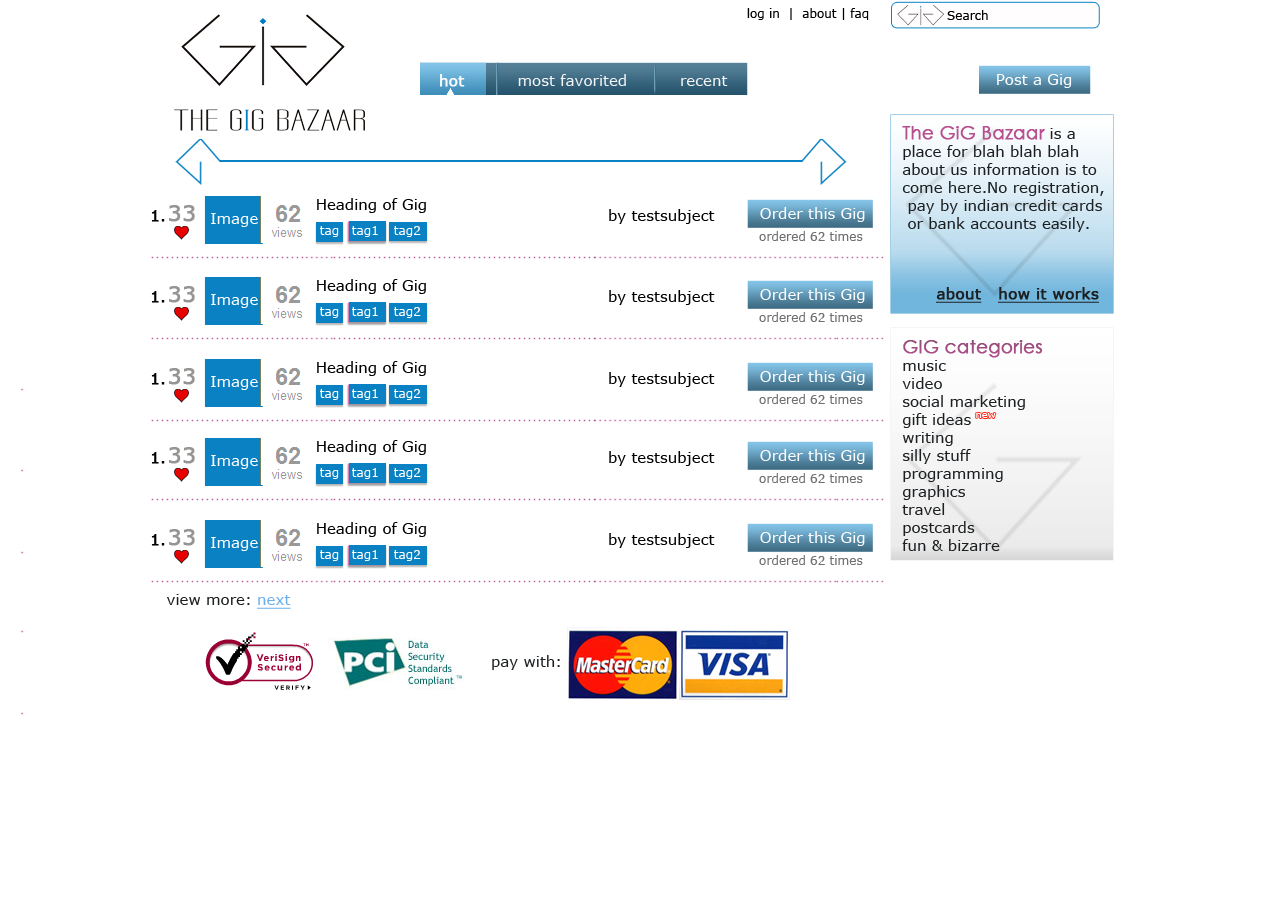
<style>
.page{position:relative;width:1263px;height:924px;background:#ffffff}
.page>*{position:absolute;margin:0}
.t1{font:12px "Verdana";color:#000000}
.t2{font:15px "Verdana";color:#f5f5f5}
.t3{font:15px "Verdana";color:#fcfafb;font-weight:bold}
.t4{font:15px "Verdana";color:#ffffff}
.t5{font:15px "Verdana";color:#1d2022}
.t6{font:18px "CenturyGothic";color:#b74f8f;font-weight:bold}
.t7{font:15px "Verdana";color:#010000}
.t8{font:22px "Verdana";color:#969594;font-weight:bold}
.t9{font:15px "Verdana";color:#000000;font-weight:bold}
.t10{font:15px "Verdana";color:#fefefe}
.t11{font:12px "Verdana";color:#ffffff}
.t12{font:12px "Verdana";color:#72706f}
.t13{font:15px "Verdana";color:#1d2022;font-weight:bold;text-decoration:underline}
.t14{font:9.7px "Verdana";color:#ffffff}
.t15{font:15px "Verdana";color:#6bb0eb;text-decoration:underline}
</style>
<div class="page">
<p class="t1" style="left:747px;top:8px;width:122px;height:12px">log in  |  about | faq</p>
<p class="t1" style="left:947px;top:10px;width:41px;height:10px">Search</p>
<p class="t2" style="left:440px;top:74px;width:288px;height:13px"><span class="t3">hot      </span>    most favorited          recent</p>
<p class="t4" style="left:997px;top:74px;width:75px;height:14px">Post a Gig</p>
<p class="t5" style="left:902px;top:126px;width:202px;height:106px"><span class="t6">The GiG Bazaar </span>is a <br>place for blah blah blah <br>about us information is to <br>come here.No registration,<br> pay by indian credit cards<br> or bank accounts easily.</p>
<p class="t7" style="left:317px;top:198px;width:109px;height:15px">Heading of Gig</p>
<p class="t8" style="left:169px;top:205px;width:26px;height:17px">33</p>
<p class="t7" style="left:609px;top:209px;width:106px;height:15px">by testsubject</p>
<p class="t4" style="left:760px;top:207px;width:105px;height:15px">Order this Gig</p>
<p class="t9" style="left:151px;top:210px;width:14px;height:12px">1.</p>
<p class="t10" style="left:211px;top:213px;width:47px;height:14px">Image</p>
<p class="t11" style="left:320px;top:226px;width:19px;height:11px">tag <span class="t4">1</span></p>
<p class="t11" style="left:352px;top:226px;width:26px;height:11px">tag1 <span class="t4">1</span></p>
<p class="t11" style="left:394px;top:226px;width:27px;height:11px">tag2<span class="t4">1</span></p>
<p class="t12" style="left:759px;top:231px;width:104px;height:10px">ordered 62 times</p>
<p class="t7" style="left:317px;top:279px;width:109px;height:15px">Heading of Gig</p>
<p class="t9" style="left:151px;top:291px;width:14px;height:12px">1.</p>
<p class="t8" style="left:169px;top:286px;width:26px;height:17px">33</p>
<p class="t10" style="left:211px;top:294px;width:47px;height:14px">Image</p>
<p class="t7" style="left:609px;top:290px;width:106px;height:15px">by testsubject</p>
<p class="t4" style="left:760px;top:288px;width:105px;height:15px">Order this Gig</p>
<p class="t13" style="left:936px;top:287px;width:163px;height:16px">about   how it works</p>
<p class="t11" style="left:320px;top:307px;width:19px;height:11px">tag <span class="t4">1</span></p>
<p class="t11" style="left:352px;top:307px;width:26px;height:11px">tag1 <span class="t4">1</span></p>
<p class="t11" style="left:394px;top:307px;width:27px;height:11px">tag2<span class="t4">1</span></p>
<p class="t12" style="left:759px;top:312px;width:104px;height:10px">ordered 62 times</p>
<p class="t6" style="left:903px;top:340px;width:140px;height:18px">GIG categories</p>
<p class="t7" style="left:317px;top:361px;width:109px;height:15px">Heading of Gig</p>
<p class="t5" style="left:902px;top:360px;width:123px;height:191px">music<br>video<br>social marketing<br>gift ideas<br>writing<br>silly stuff<br>programming<br>graphics<br>travel<br>postcards<br>fun &amp; bizarre</p>
<p class="t9" style="left:151px;top:373px;width:14px;height:12px">1.</p>
<p class="t8" style="left:169px;top:368px;width:26px;height:17px">33</p>
<p class="t10" style="left:211px;top:376px;width:47px;height:14px">Image</p>
<p class="t7" style="left:609px;top:372px;width:106px;height:15px">by testsubject</p>
<p class="t4" style="left:760px;top:370px;width:105px;height:15px">Order this Gig</p>
<p class="t11" style="left:320px;top:389px;width:19px;height:11px">tag <span class="t4">1</span></p>
<p class="t11" style="left:352px;top:389px;width:26px;height:11px">tag1 <span class="t4">1</span></p>
<p class="t11" style="left:394px;top:389px;width:27px;height:11px">tag2<span class="t4">1</span></p>
<p class="t12" style="left:759px;top:394px;width:104px;height:10px">ordered 62 times</p>
<p class="t14" style="left:976px;top:413px;width:20px;height:5px">new</p>
<p class="t8" style="left:169px;top:447px;width:26px;height:17px">33</p>
<p class="t7" style="left:317px;top:440px;width:109px;height:15px">Heading of Gig</p>
<p class="t4" style="left:760px;top:449px;width:105px;height:15px">Order this Gig</p>
<p class="t9" style="left:151px;top:452px;width:14px;height:12px">1.</p>
<p class="t10" style="left:211px;top:455px;width:47px;height:14px">Image</p>
<p class="t7" style="left:609px;top:451px;width:106px;height:15px">by testsubject</p>
<p class="t11" style="left:320px;top:468px;width:19px;height:11px">tag <span class="t4">1</span></p>
<p class="t11" style="left:352px;top:468px;width:26px;height:11px">tag1 <span class="t4">1</span></p>
<p class="t11" style="left:394px;top:468px;width:27px;height:11px">tag2<span class="t4">1</span></p>
<p class="t12" style="left:759px;top:473px;width:104px;height:10px">ordered 62 times</p>
<p class="t9" style="left:151px;top:534px;width:14px;height:12px">1.</p>
<p class="t8" style="left:169px;top:529px;width:26px;height:17px">33</p>
<p class="t7" style="left:317px;top:522px;width:109px;height:15px">Heading of Gig</p>
<p class="t7" style="left:609px;top:533px;width:106px;height:15px">by testsubject</p>
<p class="t4" style="left:760px;top:531px;width:105px;height:15px">Order this Gig</p>
<p class="t10" style="left:211px;top:537px;width:47px;height:14px">Image</p>
<p class="t11" style="left:320px;top:550px;width:19px;height:11px">tag <span class="t4">1</span></p>
<p class="t11" style="left:352px;top:550px;width:26px;height:11px">tag1 <span class="t4">1</span></p>
<p class="t11" style="left:394px;top:550px;width:27px;height:11px">tag2<span class="t4">1</span></p>
<p class="t12" style="left:759px;top:555px;width:104px;height:10px">ordered 62 times</p>
<p class="t5" style="left:167px;top:594px;width:124px;height:15px">view more: <span class="t15">next</span></p>
<p class="t5" style="left:492px;top:655px;width:68px;height:15px">pay with:</p>
</div>
